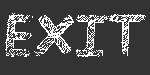
<style>
.page{position:relative;width:150px;height:75px;background:#333333}
.page>*{position:absolute;margin:0}
.t1{font:59px "Drawing-Guides";color:#ffffff;scale:1.08 1}
</style>
<div class="page">
<p class="t1" style="left:5px;top:13px;width:141px;height:44px">exit</p>
</div>
